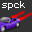
<style>
.page{position:relative;width:32px;height:32px;background:#333333}
.page>*{position:absolute;margin:0}
.t1{font:9px "Monaco";letter-spacing:0.06em;color:#ffffff}
</style>
<div class="page">
<p class="t1" style="left:2px;top:1px;width:23px;height:9px">spck</p>
</div>
